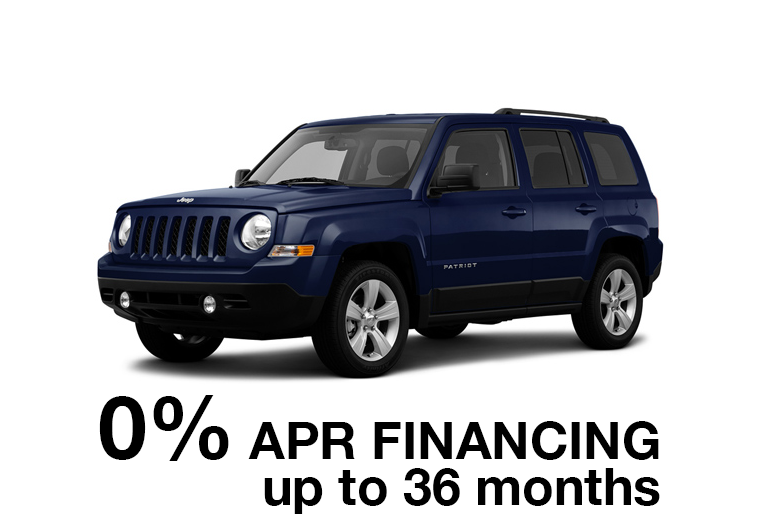
<style>
.page{position:relative;width:762px;height:526px;background:#ffffff}
.page>*{position:absolute;margin:0}
.t1{font:51.8px/46px "HelveticaNeue-Bold";color:#000000}
.t2{font:87.9px/46px "HelveticaNeue-Bold";color:#000000}
</style>
<div class="page">
<p class="t1" style="left:99px;top:395px;width:561px;height:119px;text-align:right"><span class="t2">0%</span> APR FINANCING<br>up to 36 months</p>
</div>
